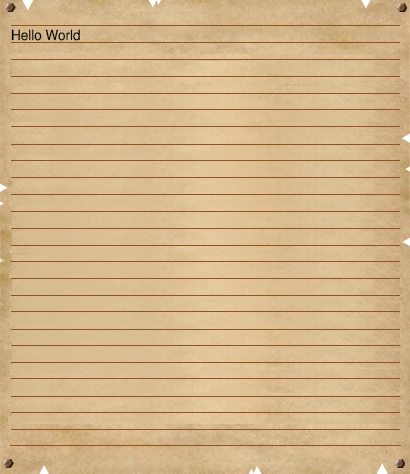
<style>
.page{position:relative;width:410px;height:474px}
.page>*{position:absolute;margin:0}
.t1{font:14px "NimbusSanL-Regu";color:#000000;scale:0.97 1}
</style>
<div class="page">
<p class="t1" style="left:11px;top:29px;width:69px;height:12px">Hello World</p>
</div>
